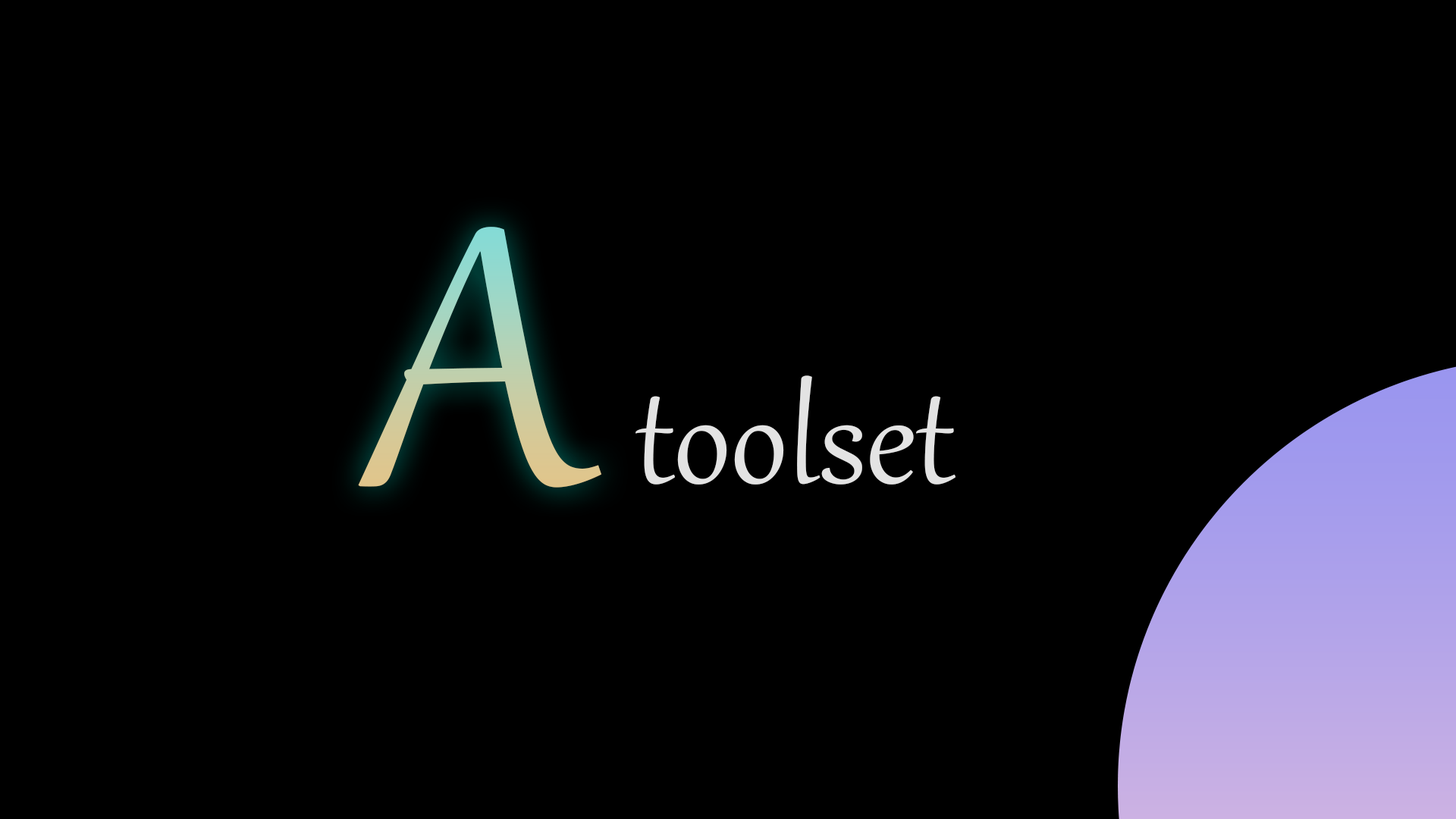
<style>
.page{position:relative;width:1456px;height:819px;background:#000000}
.page>*{position:absolute;margin:0}
.t1{font:453.8px "Gabriola"}
.t2{font:161.1px "Gabriola";color:#e3e3e3}
</style>
<div class="page">
<p class="t1" style="left:358px;top:227px;width:243px;height:261px">A</p>
<p class="t2" style="left:635px;top:375px;width:320px;height:110px">toolset</p>
</div>
